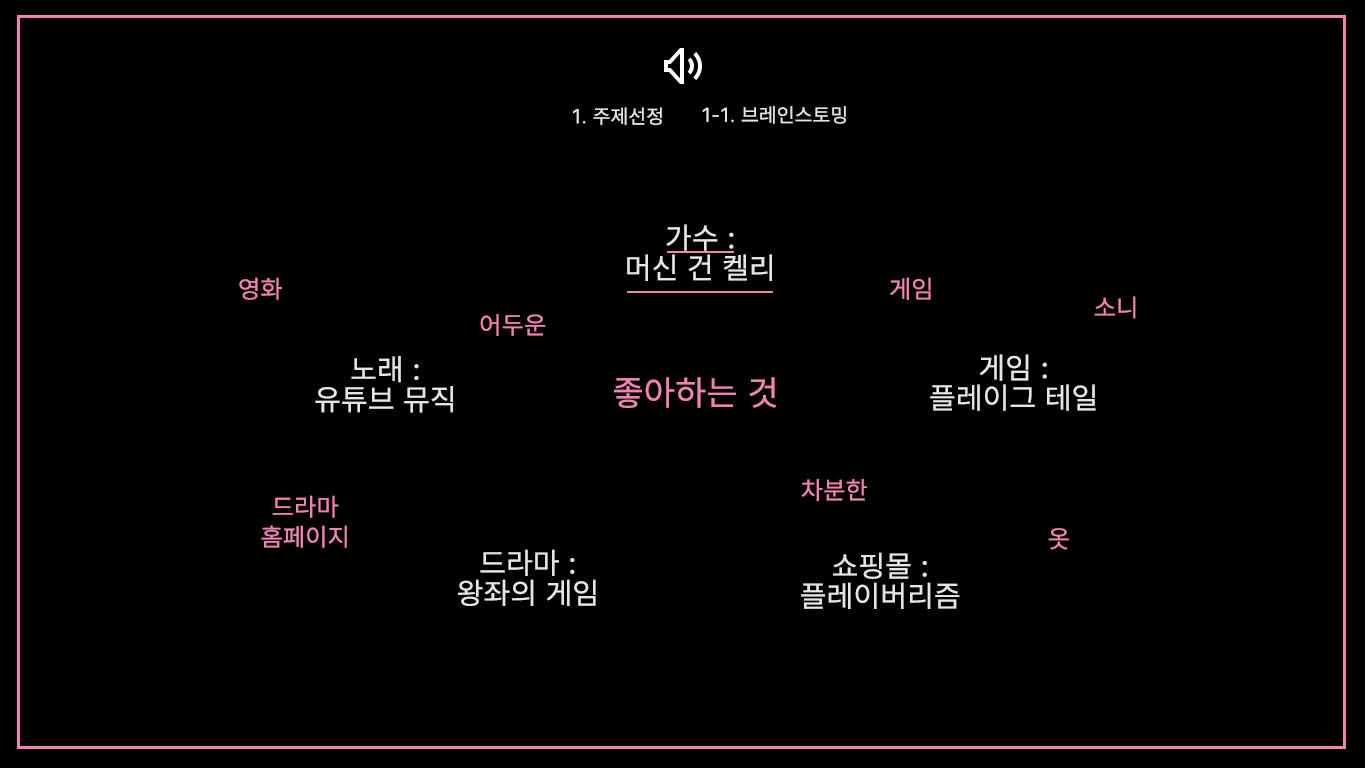
<style>
.page{position:relative;width:1365px;height:768px;background:#000000}
.page>*{position:absolute;margin:0}
.t1{font:20px "Pretendard-Regular";letter-spacing:0.03em;color:#e5e5e5}
.t2{font:30px/30px "Pretendard-Regular";letter-spacing:0.03em;color:#e5e5e5}
.t3{font:25px "Pretendard-Regular";letter-spacing:0.03em;color:#f183b2}
.t4{font:35px "Pretendard-Regular";letter-spacing:0.03em;color:#f183b2}
.t5{font:25px/30px "Pretendard-Regular";letter-spacing:0.03em;color:#f183b2}
</style>
<div class="page">
<p class="t1" style="left:573px;top:107px;width:89px;height:18px">1. 주제선정</p>
<p class="t1" style="left:702px;top:106px;width:144px;height:18px">1-1. 브레인스토밍</p>
<p class="t2" style="left:627px;top:224px;width:145px;height:57px;text-align:center">가수 :<br>머신 건 켈리</p>
<p class="t3" style="left:239px;top:277px;width:43px;height:23px">영화</p>
<p class="t3" style="left:890px;top:277px;width:41px;height:23px">게임</p>
<p class="t3" style="left:1094px;top:296px;width:42px;height:23px">소니</p>
<p class="t3" style="left:480px;top:314px;width:66px;height:22px">어두운</p>
<p class="t2" style="left:315px;top:356px;width:138px;height:57px;text-align:center">노래 :<br>유튜브 뮤직</p>
<p class="t2" style="left:930px;top:354px;width:166px;height:57px;text-align:center">게임 :<br>플레이그 테일</p>
<p class="t4" style="left:614px;top:377px;width:163px;height:31px">좋아하는 것</p>
<p class="t3" style="left:801px;top:479px;width:66px;height:22px">차분한</p>
<p class="t5" style="left:261px;top:495px;width:86px;height:53px;text-align:center">드라마<br>홈페이지</p>
<p class="t3" style="left:1048px;top:528px;width:21px;height:22px">옷</p>
<p class="t2" style="left:458px;top:549px;width:138px;height:57px;text-align:center">드라마 :<br>왕좌의 게임</p>
<p class="t2" style="left:801px;top:552px;width:159px;height:57px;text-align:center">쇼핑몰 :<br>플레이버리즘</p>
</div>
